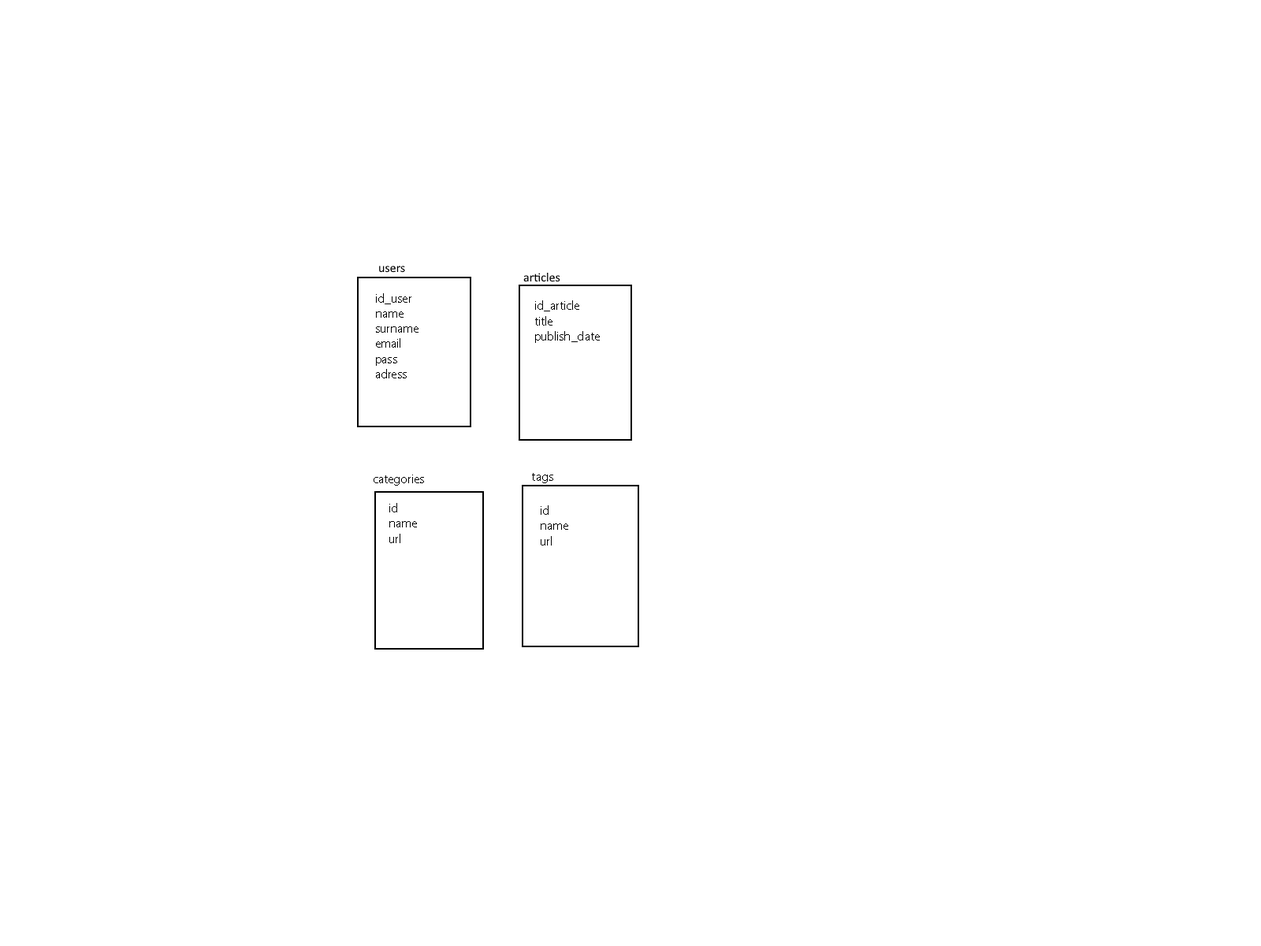
<style>
.page{position:relative;width:1261px;height:946px;background:#ffffff}
.page>*{position:absolute;margin:0}
.t1{font:12.6px "MyriadPro-Regular";color:#000000}
</style>
<div class="page">
<p class="t1" style="left:376px;top:293px;width:42px;height:85px">id_user<br>name<br>surname<br>email<br>pass<br>adress</p>
<p class="t1" style="left:535px;top:300px;width:65px;height:43px">id_article<br>title<br>publish_date</p>
<p class="t1" style="left:389px;top:503px;width:28px;height:40px">id<br>name<br>url</p>
<p class="t1" style="left:541px;top:505px;width:27px;height:40px">id<br>name<br>url</p>
</div>
